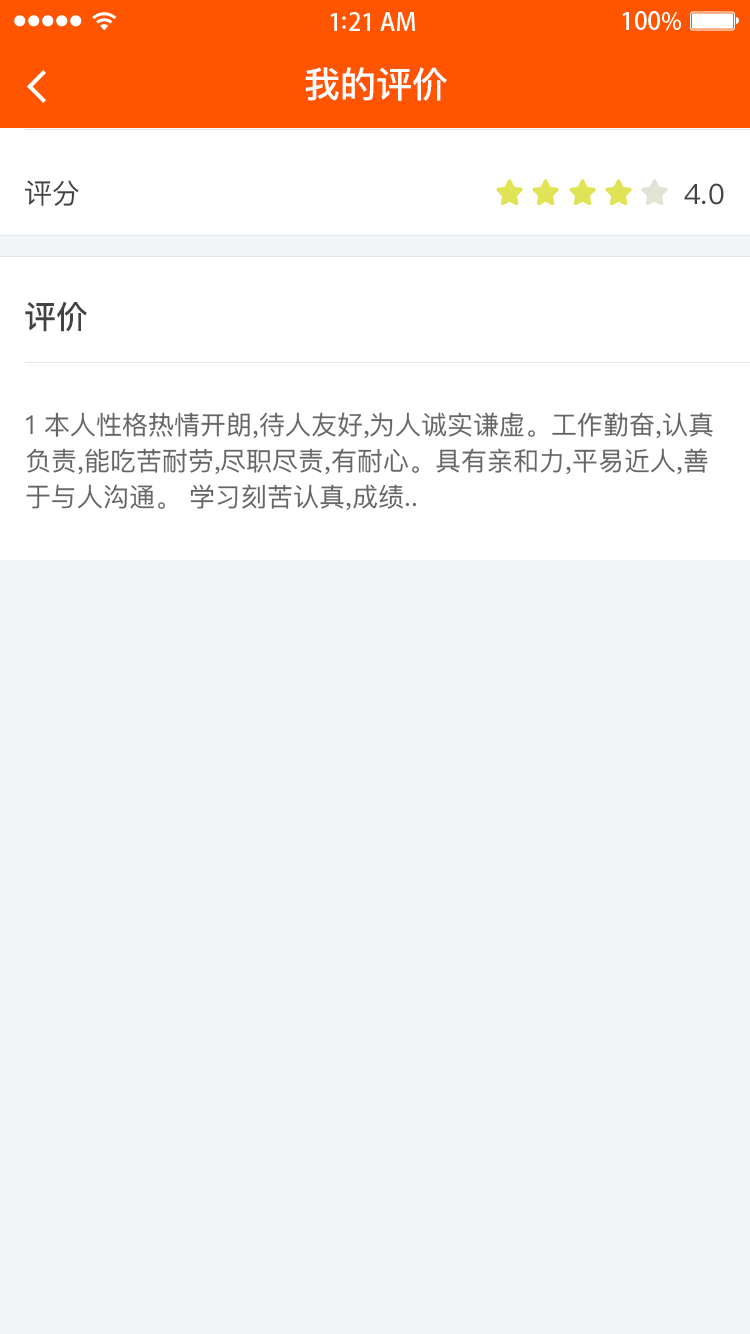
<style>
.page{position:relative;width:750px;height:1334px;background:#f2f5f7}
.page>*{position:absolute;margin:0}
.t1{font:36px "PingFangSC-Medium";color:#ffffff}
.t2{font:28px "PingFangSC-Regular";color:#434343}
.t3{font:32px "PingFangSC-Medium";color:#434343}
.t4{font:26px/40px "PingFangSC-Regular";color:#666666}
</style>
<div class="page">
<p class="t1" style="left:305px;top:67px;width:142px;height:34px">我的评价</p>
<p class="t2" style="left:25px;top:180px;width:54px;height:26px">评分</p>
<p class="t2" style="left:684px;top:183px;width:40px;height:22px">4.0</p>
<p class="t3" style="left:25px;top:301px;width:62px;height:31px">评价</p>
<p class="t4" style="left:26px;top:412px;width:687px;height:99px">1 本人性格热情开朗,待人友好,为人诚实谦虚。工作勤奋,认真<br>负责,能吃苦耐劳,尽职尽责,有耐心。具有亲和力,平易近人,善<br>于与人沟通。 学习刻苦认真,成绩..</p>
</div>
